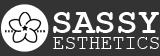
<style>
.page{position:relative;width:160px;height:56px;background:#333333}
.page>*{position:absolute;margin:0}
.t1{font:36px "CourierNewPS-BoldMT";color:#ffffff}
.t2{font:20px "CourierNewPSMT";color:#ffffff}
</style>
<div class="page">
<p class="t1" style="left:53px;top:12px;width:106px;height:21px">SASSY</p>
<p class="t2" style="left:53px;top:37px;width:106px;height:12px">ESTHETICS</p>
</div>
